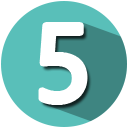
<style>
.page{position:relative;width:128px;height:128px;background:#ffffff}
.page>*{position:absolute;margin:0}
.t1{font:100px "MicrosoftYaHei";color:#ffffff}
</style>
<div class="page">
<p class="t1" style="left:41px;top:25px;width:44px;height:77px">5</p>
</div>
